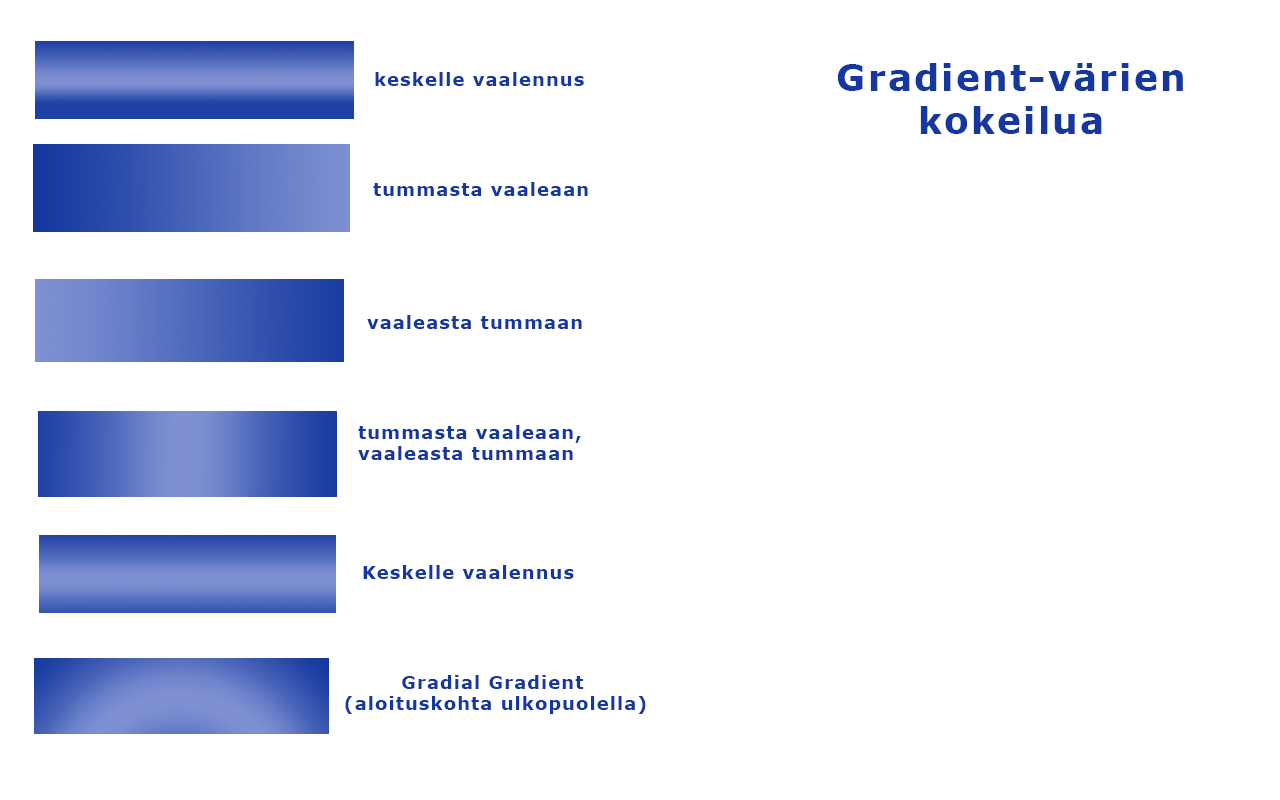
<style>
.page{position:relative;width:1280px;height:800px;background:#ffffff}
.page>*{position:absolute;margin:0}
.t1{font:36px "Verdana-Bold";letter-spacing:0.06em;color:#14389f}
.t2{font:18px "Verdana-Bold";letter-spacing:0.06em;color:#14389f}
</style>
<div class="page">
<p class="t1" style="left:837px;top:63px;width:346px;height:71px;text-align:center">Gradient-värien kokeilua</p>
<p class="t2" style="left:375px;top:72px;width:209px;height:14px">keskelle vaalennus</p>
<p class="t2" style="left:373px;top:182px;width:215px;height:14px">tummasta vaaleaan</p>
<p class="t2" style="left:367px;top:315px;width:215px;height:14px">vaaleasta tummaan</p>
<p class="t2" style="left:358px;top:425px;width:223px;height:35px">tummasta vaaleaan,<br>vaaleasta tummaan</p>
<p class="t2" style="left:363px;top:565px;width:211px;height:14px">Keskelle vaalennus</p>
<p class="t2" style="left:345px;top:675px;width:301px;height:39px;text-align:center">Gradial Gradient <br>(aloituskohta ulkopuolella)</p>
</div>
